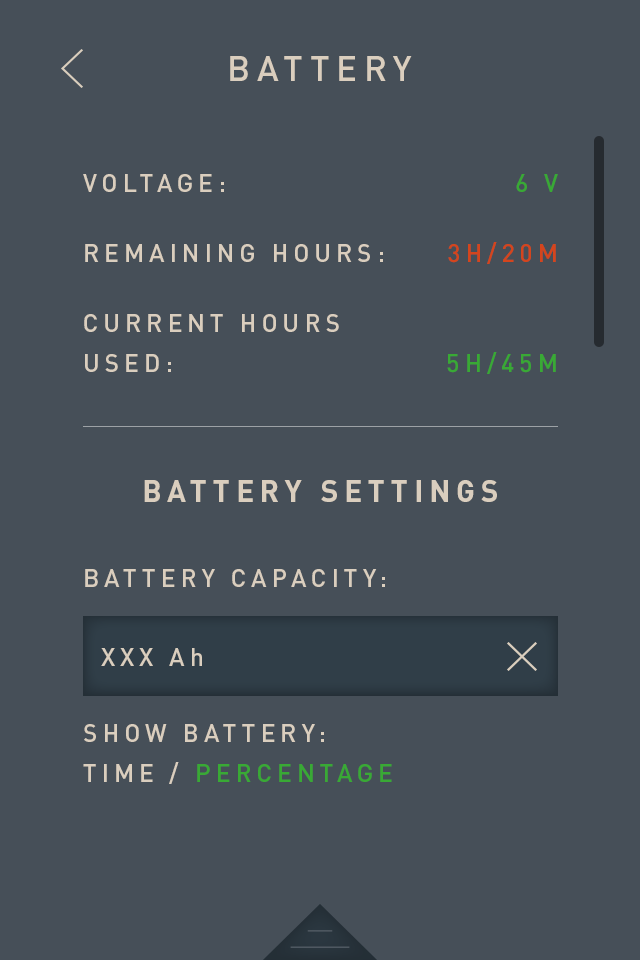
<style>
.page{position:relative;width:640px;height:960px;background:#464f58}
.page>*{position:absolute;margin:0}
.t1{font:35px "DINPro-Medium";letter-spacing:0.2em;color:#dacebe}
.t2{font:20.3px/30.3px "DINPro-Light";letter-spacing:0.2em;color:#dacebe}
.t3{font:25px/70px "DINPro-Medium";letter-spacing:0.2em;color:#dacebe}
.t4{font:25px/40px "DINPro-Medium";letter-spacing:0.2em;color:#dacebe}
.t5{font:30px/60px "DINPro-Bold";letter-spacing:0.2em;color:#dacebe}
.t6{font:25px/85px "DINPro-Medium";letter-spacing:0.2em;color:#dacebe}
.t7{font:25px/40px "DINPro-Medium";letter-spacing:0.2em;color:#39a935}
.t8{font:25px/70px "DINPro-Medium";letter-spacing:0.2em;color:#39a935}
.t9{font:25px/70px "DINPro-Medium";letter-spacing:0.2em;color:#d4451d}
.t10{font:25.1px/105.5px "DINPro-Medium";letter-spacing:0.2em;color:#dacebe}
</style>
<div class="page">
<p class="t1" style="left:230px;top:56px;width:182px;height:25px">BATTERY</p>
<p class="t2" style="left:83px;top:174px;width:414px;height:610px"><span class="t3">VOLTAGE:<br>REMAINING HOURS:<br>CURRENT HOURS <br></span><span class="t4">USED:<br><br></span><span class="t5">BATTERY SETTINGS<br></span><span class="t6">BATTERY CAPACITY:<br><br></span><span class="t3">SHOW BATTERY:<br></span><span class="t4">TIME / </span><span class="t7">PERCENTAGE<br></span><span class="t3">BATTERY ALARM:<br></span><span class="t8">CHARGING<br><br><br></span>YOU WILL BE CHARGED EVERY TIME YOU UPDATE. FEES ARE CHARGED BY YOUR NETWORK OPERATOR.</p>
<p class="t9" style="left:447px;top:174px;width:111px;height:200px;text-align:right"><span class="t8">6 V<br></span>3H/20M<br><br><span class="t7">5H/45M</span></p>
<p class="t10" style="left:101px;top:648px;width:101px;height:18px">XXX Ah<br>ISCH</p>
</div>
